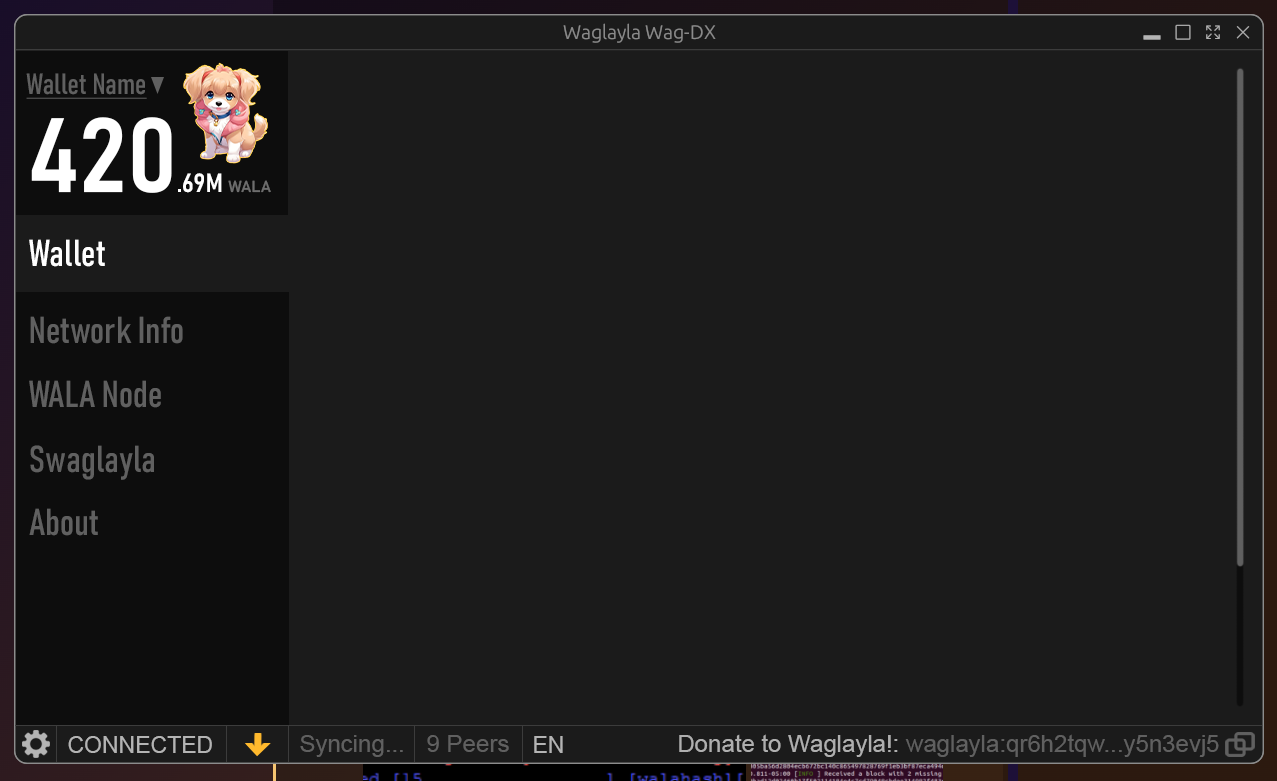
<style>
.page{position:relative;width:1277px;height:781px;background:#1b1b1b}
.page>*{position:absolute;margin:0}
.t1{font:29px "Bahnschrift-Condensed";color:#606060;text-decoration:underline}
.t2{font:26px "Bahnschrift-SemiBoldSemiCondensed";color:#ffffff}
.t3{font:104px "Bahnschrift-SemiBoldSemiCondensed";color:#ffffff}
.t4{font:16px "Bahnschrift-SemiBold";color:#6d6d6d}
.t5{font:37px "Bahnschrift-Condensed";color:#ffffff}
.t6{font:37px "Bahnschrift-Condensed";color:#606060}
.t7{font:23px "ArialMT";color:#b4b4b4}
.t8{font:24px "ArialMT";color:#606060}
.t9{font:24px "ArialMT";color:#afafaf}
</style>
<div class="page">
<p class="t1" style="left:26px;top:73px;width:121px;height:26px">Wallet Name</p>
<p class="t2" style="left:31px;top:117px;width:240px;height:76px"><span class="t3">420</span>.69M <span class="t4">WALA</span></p>
<p class="t5" style="left:29px;top:239px;width:76px;height:28px">Wallet</p>
<p class="t6" style="left:30px;top:316px;width:153px;height:28px">Network Info</p>
<p class="t6" style="left:29px;top:380px;width:132px;height:28px">WALA Node</p>
<p class="t6" style="left:30px;top:445px;width:124px;height:35px">Swaglayla</p>
<p class="t6" style="left:29px;top:508px;width:69px;height:28px">About</p>
<p class="t7" style="left:68px;top:736px;width:144px;height:17px">CONNECTED</p>
<p class="t8" style="left:300px;top:735px;width:103px;height:22px">Syncing...</p>
<p class="t8" style="left:427px;top:735px;width:82px;height:17px">9 Peers</p>
<p class="t7" style="left:534px;top:736px;width:29px;height:17px">EN</p>
<p class="t8" style="left:679px;top:734px;width:540px;height:23px"><span class="t9">Donate to Waglayla!:</span> waglayla:qr6h2tqw...y5n3evj5</p>
</div>
